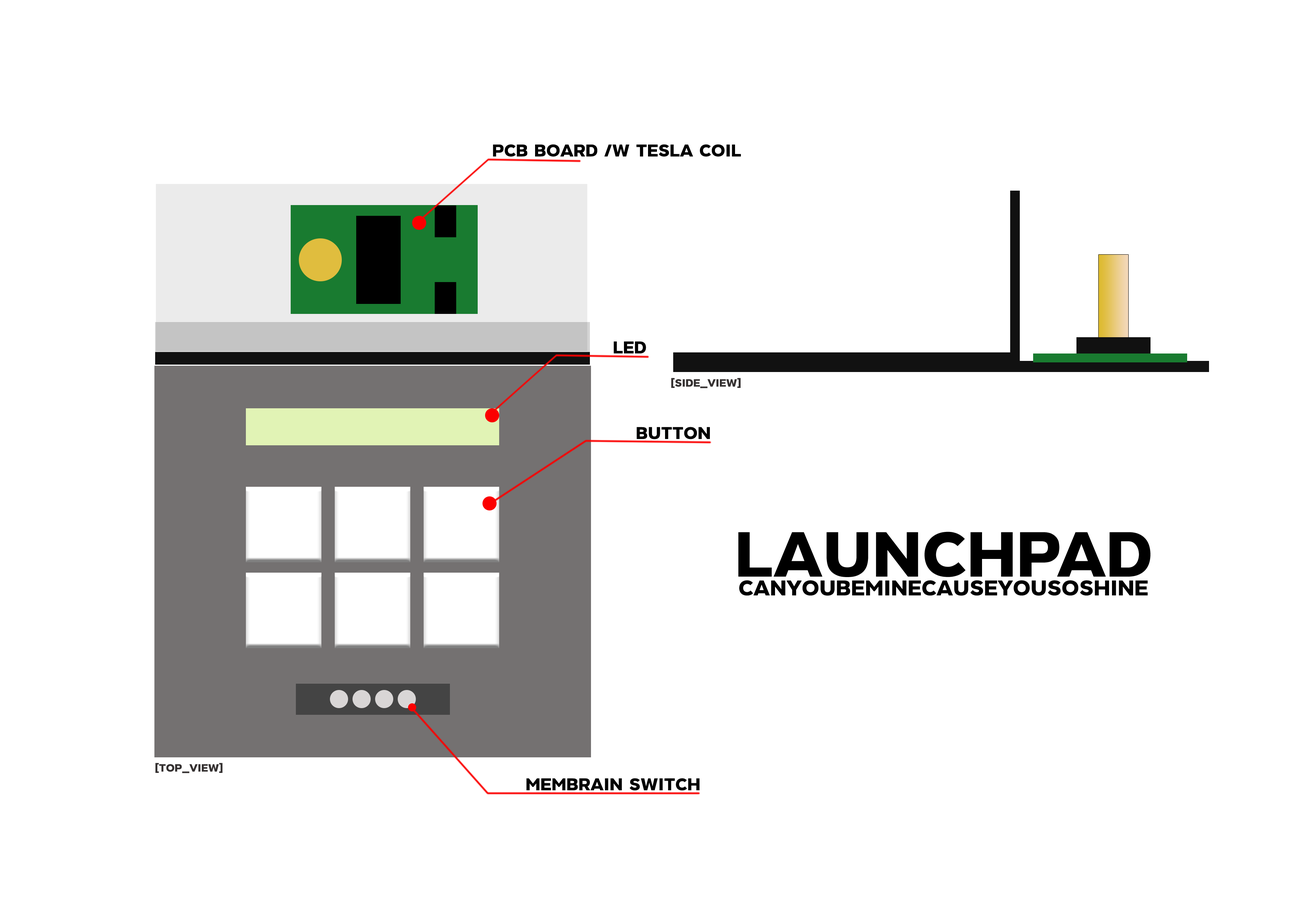
<style>
.page{position:relative;width:1299px;height:918px;background:#ffffff}
.page>*{position:absolute;margin:0}
.t1{font:24.7px "FCFridayMedium";color:#000000;text-transform:uppercase}
.t2{font:24.7px "FCFridayMedium";color:#010101;text-transform:uppercase}
.t3{font:15.3px "FCFridayMedium";color:#343030;text-transform:uppercase}
.t4{font:92.6px "FCFridayMedium";color:#000000;text-transform:uppercase}
.t5{font:31px "FCFridayMedium";color:#000000;text-transform:uppercase}
</style>
<div class="page">
<p class="t1" style="left:493px;top:144px;width:248px;height:13px">pcb board /w tesla coil</p>
<p class="t2" style="left:613px;top:341px;width:33px;height:13px">LED</p>
<p class="t3" style="left:671px;top:378px;width:69px;height:10px">[side_view]</p>
<p class="t1" style="left:636px;top:427px;width:74px;height:12px">BUTTON</p>
<p class="t4" style="left:738px;top:532px;width:412px;height:45px">LAUNCHPAD</p>
<p class="t5" style="left:739px;top:580px;width:409px;height:16px">canyoubeminecauseyousoshine</p>
<p class="t3" style="left:155px;top:763px;width:68px;height:10px">[top_view]</p>
<p class="t2" style="left:526px;top:778px;width:173px;height:13px">membrain switch</p>
</div>
